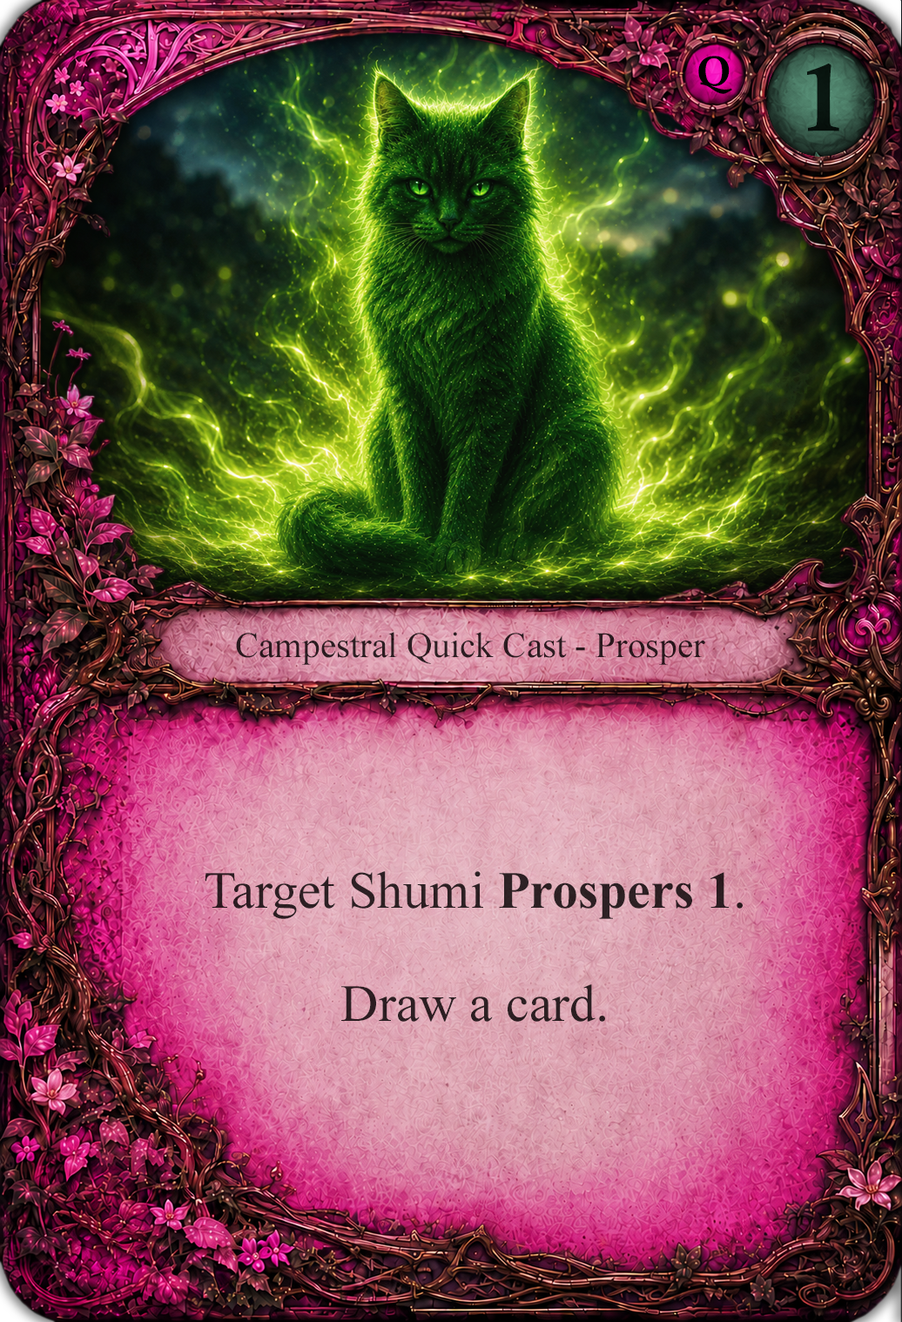
<style>
.page{position:relative;width:902px;height:1322px}
.page>*{position:absolute;margin:0}
.t1{font:41.8px "CalisMTBol";color:#000000}
.t2{font:95.8px "CalisMTBol";color:#000000}
.t3{font:35.7px "TimesNewRomanPSMT";color:#2b1b20}
.t4{font:52.2px/56.6px "TimesNewRomanPSMT";color:#2c1f23}
.t5{font:52.2px/56.6px "TimesNewRomanPS-BoldMT";color:#2c1f23}
</style>
<div class="page">
<p class="t1" style="left:698px;top:56px;width:34px;height:38px">Q</p>
<p class="t2" style="left:806px;top:64px;width:33px;height:67px;opacity:0.9">1</p>
<p class="t3" style="left:236px;top:632px;width:469px;height:33px">Campestral Quick Cast - Prosper</p>
<p class="t4" style="left:205px;top:871px;width:538px;height:151px;text-align:center">Target Shumi <span class="t5">Prospers 1</span>.<br><br>Draw a card.</p>
</div>
